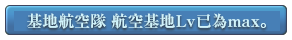
<style>
.page{position:relative;width:292px;height:40px;background:#ffffff}
.page>*{position:absolute;margin:0}
.t1{font:16px "RyuminPr6N-ExBold";color:#d1f3fb}
</style>
<div class="page">
<p class="t1" style="left:27px;top:13px;width:239px;height:16px">基地航空隊 航空基地Lv已為max。</p>
</div>
